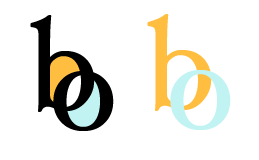
<style>
.page{position:relative;width:259px;height:160px;background:#ffffff}
.page>*{position:absolute;margin:0}
.t1{font:128px "HoeflerText-Regular";color:#ffbe40}
.t2{font:128px "HoeflerText-Regular";color:#c2f2f2}
</style>
<div class="page">
<p class="t1" style="left:147px;top:14px;width:65px;height:97px">b</p>
<p class="t2" style="left:170px;top:70px;width:61px;height:60px">o</p>
</div>
